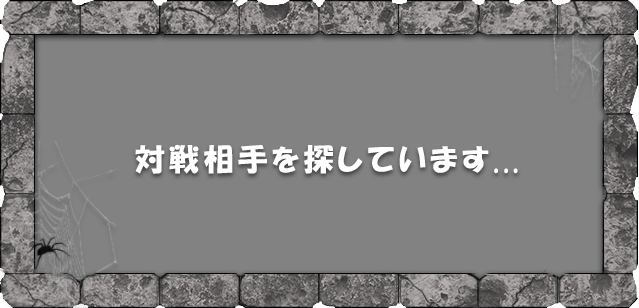
<style>
.page{position:relative;width:639px;height:308px;background:#828282}
.page>*{position:absolute;margin:0}
.t1{font:30px "HGPSoeiKakupoptai";letter-spacing:0.14em;color:#ffffff}
</style>
<div class="page">
<p class="t1" style="left:135px;top:144px;width:383px;height:30px">対戦相手を探しています...</p>
</div>
